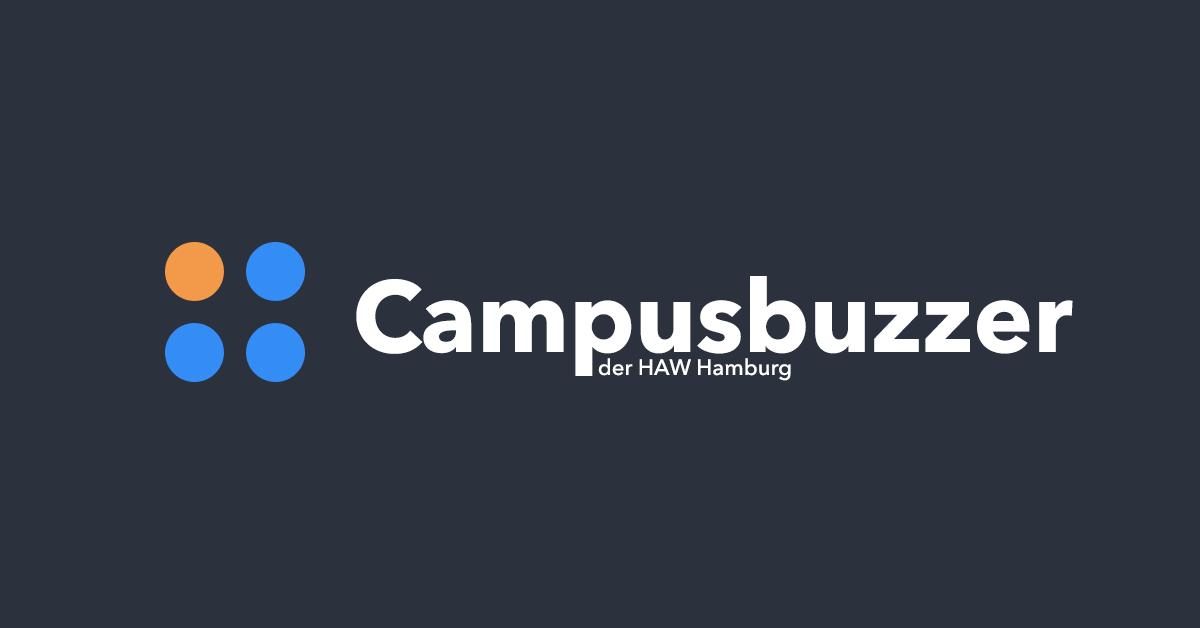
<style>
.page{position:relative;width:1200px;height:628px;background:#2c313e}
.page>*{position:absolute;margin:0}
.t1{font:100px "AvenirNext-Bold";color:#ffffff}
.t2{font:22px "AvenirNext-Medium";color:#ffffff}
</style>
<div class="page">
<p class="t1" style="left:356px;top:276px;width:717px;height:100px">Campusbuzzer</p>
<p class="t2" style="left:598px;top:358px;width:193px;height:23px">der HAW Hamburg</p>
</div>
